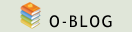
<style>
.page{position:relative;width:132px;height:32px;background:#e0e6d9}
.page>*{position:absolute;margin:0}
.t1{font:16px "TrebuchetMS";letter-spacing:0.1em;color:#000000}
</style>
<div class="page">
<p class="t1" style="left:49px;top:15px;width:63px;height:13px">O-BLOG</p>
</div>
